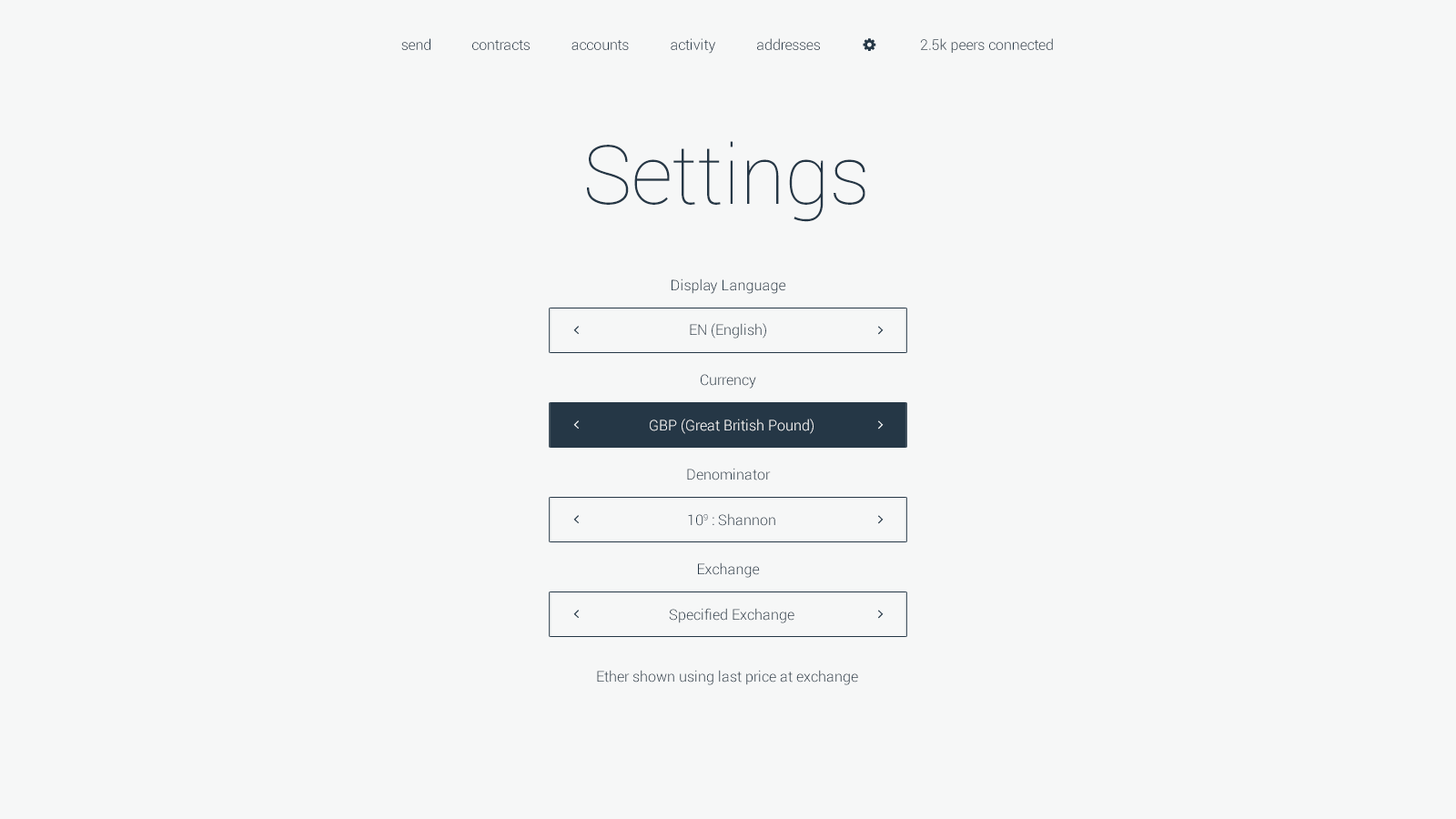
<style>
.page{position:relative;width:1456px;height:819px;background:#f6f7f7}
.page>*{position:absolute;margin:0}
.t1{font:14.6px "Roboto-Light";color:#253746}
.t2{font:81.9px "Roboto-Thin";color:#253746}
.t3{font:14.6px "Roboto-Light";color:#ffffff}
</style>
<div class="page">
<p class="t1" style="left:401px;top:38px;width:29px;height:12px">send</p>
<p class="t1" style="left:472px;top:40px;width:58px;height:10px">contracts</p>
<p class="t1" style="left:571px;top:40px;width:58px;height:10px">accounts</p>
<p class="t1" style="left:671px;top:38px;width:44px;height:16px">activity</p>
<p class="t1" style="left:757px;top:38px;width:63px;height:12px">addresses</p>
<p class="t1" style="left:920px;top:38px;width:133px;height:15px">2.5k peers connected</p>
<p class="t2" style="left:587px;top:141px;width:278px;height:81px">Settings</p>
<p class="t1" style="left:672px;top:278px;width:114px;height:16px">Display Language</p>
<p class="t1" style="left:690px;top:323px;width:76px;height:16px">EN (English)</p>
<p class="t1" style="left:701px;top:374px;width:55px;height:15px">Currency</p>
<p class="t3" style="left:650px;top:419px;width:164px;height:15px">GBP (Great British Pound)</p>
<p class="t1" style="left:687px;top:468px;width:84px;height:12px">Denominator</p>
<p class="t1" style="left:688px;top:513px;width:87px;height:13px">109 : Shannon</p>
<p class="t1" style="left:698px;top:562px;width:62px;height:16px">Exchange</p>
<p class="t1" style="left:669px;top:608px;width:125px;height:15px">Specified Exchange</p>
<p class="t1" style="left:597px;top:670px;width:261px;height:15px">Ether shown using last price at exchange</p>
</div>
